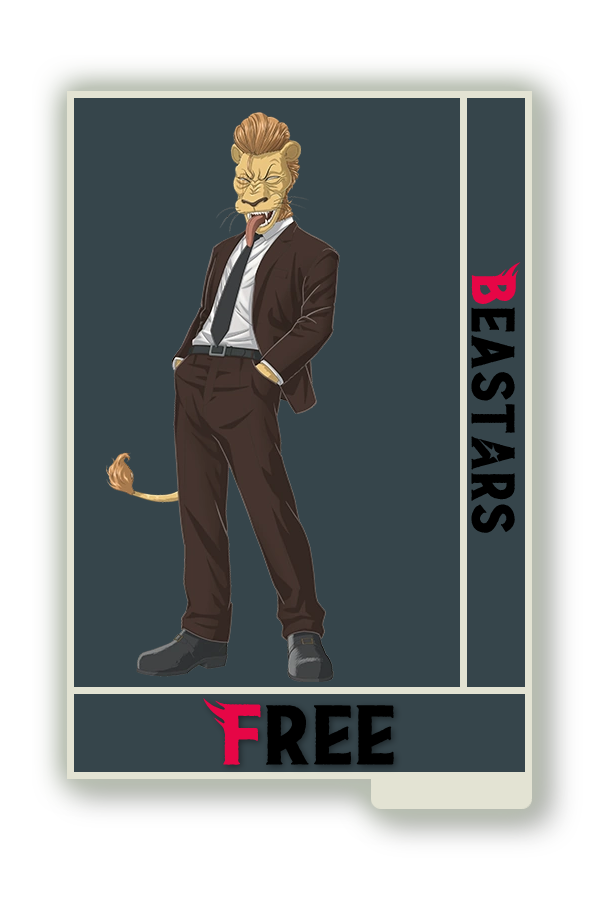
<style>
.page{position:relative;width:600px;height:900px;background:#36454b}
.page>*{position:absolute;margin:0}
.t1{font:48.8px "BEAST";color:#000000}
.t2{font:48.8px "BEAST";color:#e60646}
.t3{font:67px "BEAST";color:#000000;scale:1.12 1}
.t4{font:67px "BEAST";color:#e60646;scale:1.12 1}
</style>
<div class="page">
<p class="t1" style="left:471px;top:262px;width:50px;height:271px;rotate:90deg"><span class="t2">B</span>east@rs</p>
<p class="t3" style="left:203px;top:698px;width:191px;height:67px"><span class="t4">F</span>ree</p>
</div>
